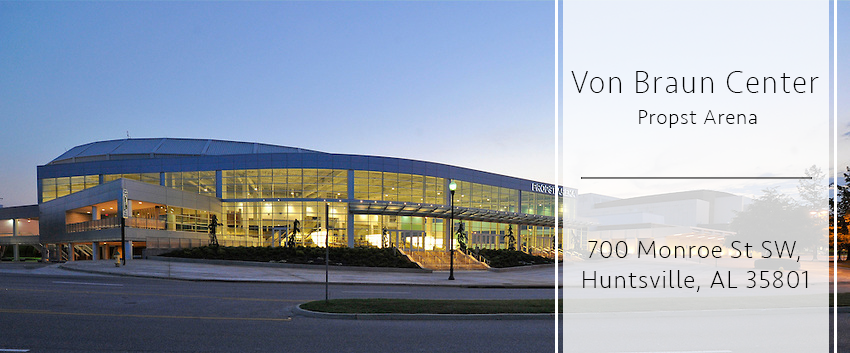
<style>
.page{position:relative;width:850px;height:353px}
.page>*{position:absolute;margin:0}
.t1{font:33.3px "Seravek-ExtraLight";letter-spacing:0.05em;color:#000000;scale:0.94 1}
.t2{font:20.8px "Seravek-ExtraLight";letter-spacing:0.05em;color:#000000}
.t3{font:25px "Seravek-ExtraLight";letter-spacing:0.05em;color:#000000}
</style>
<div class="page">
<p class="t1" style="left:571px;top:71px;width:248px;height:22px">Von Braun Center</p>
<p class="t2" style="left:639px;top:110px;width:118px;height:18px">Propst Arena</p>
<p class="t3" style="left:583px;top:241px;width:225px;height:51px">700 Monroe St SW, <br>Huntsville, AL 35801</p>
</div>
